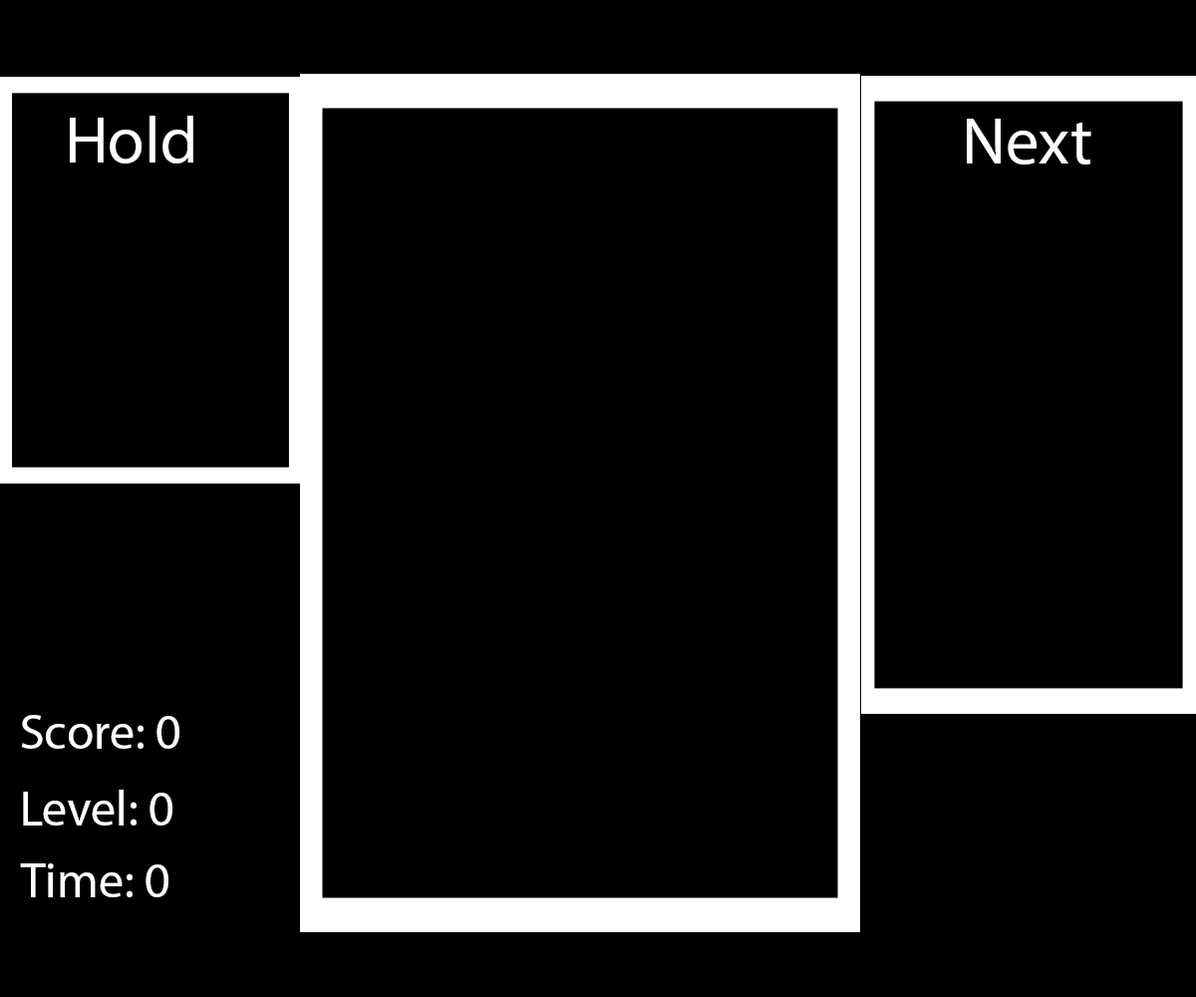
<style>
.page{position:relative;width:1196px;height:997px;background:#000000}
.page>*{position:absolute;margin:0}
.t1{font:66.5px "MyriadPro-Regular";color:#ffffff}
.t2{font:49.8px "MyriadPro-Regular";color:#ffffff}
.t3{font:12px "MyriadPro-Regular";color:#ffffff}
</style>
<div class="page">
<p class="t1" style="left:70px;top:116px;width:123px;height:47px">Hold</p>
<p class="t1" style="left:967px;top:119px;width:125px;height:45px">Next</p>
<p class="t2" style="left:21px;top:715px;width:158px;height:34px">Score: 0</p>
<p class="t3" style="left:23px;top:789px;width:149px;height:36px">Level: 0</p>
<p class="t3" style="left:20px;top:863px;width:148px;height:34px">Time: 0</p>
</div>
